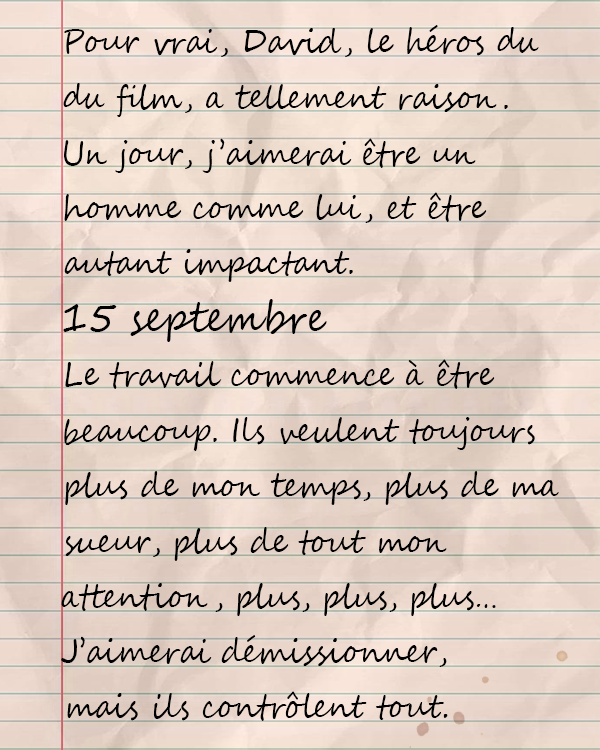
<style>
.page{position:relative;width:600px;height:750px}
.page>*{position:absolute;margin:0}
.t1{font:33.3px "SegoeScript";color:#000000;scale:0.9 1}
.t2{font:41.8px "SegoeScript";color:#000000;scale:0.9 1}
</style>
<div class="page">
<p class="t1" style="left:64px;top:25px;width:475px;height:32px">Pour vrai, David, le héros du</p>
<p class="t1" style="left:63px;top:83px;width:445px;height:34px">du film, a tellement raison.</p>
<p class="t1" style="left:64px;top:138px;width:412px;height:35px">Un jour, j’aimerai être un homme</p>
<p class="t1" style="left:64px;top:192px;width:423px;height:31px">homme comme lui, et être</p>
<p class="t1" style="left:64px;top:249px;width:289px;height:33px">autant impactant.</p>
<p class="t2" style="left:63px;top:299px;width:264px;height:43px">15 septembre</p>
<p class="t1" style="left:65px;top:359px;width:430px;height:30px">Le travail commence à être</p>
<p class="t1" style="left:64px;top:417px;width:471px;height:34px">beaucoup. Ils veulent toujours</p>
<p class="t1" style="left:65px;top:471px;width:494px;height:34px">plus de mon temps, plus de ma</p>
<p class="t1" style="left:65px;top:527px;width:382px;height:34px">sueur, plus de tout mon</p>
<p class="t1" style="left:61px;top:583px;width:435px;height:33px">attention, plus, plus, plus…</p>
<p class="t1" style="left:61px;top:635px;width:386px;height:32px">J’aimerai démissionner,</p>
<p class="t1" style="left:67px;top:691px;width:381px;height:30px">mais ils contrôlent tout.</p>
</div>
